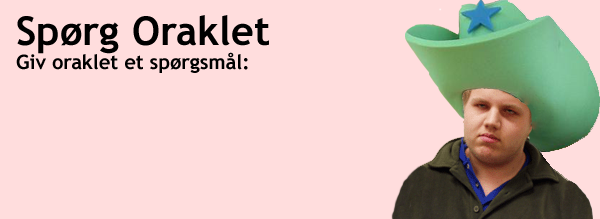
<style>
.page{position:relative;width:600px;height:219px;background:#ffdddd}
.page>*{position:absolute;margin:0}
.t1{font:20px "TrebuchetMS-Bold";color:#000000}
.t2{font:40px "TrebuchetMS-Bold";color:#000000}
</style>
<div class="page">
<p class="t1" style="left:16px;top:15px;width:253px;height:58px"><span class="t2">Spørg Oraklet<br></span>Giv oraklet et spørgsmål:</p>
</div>
